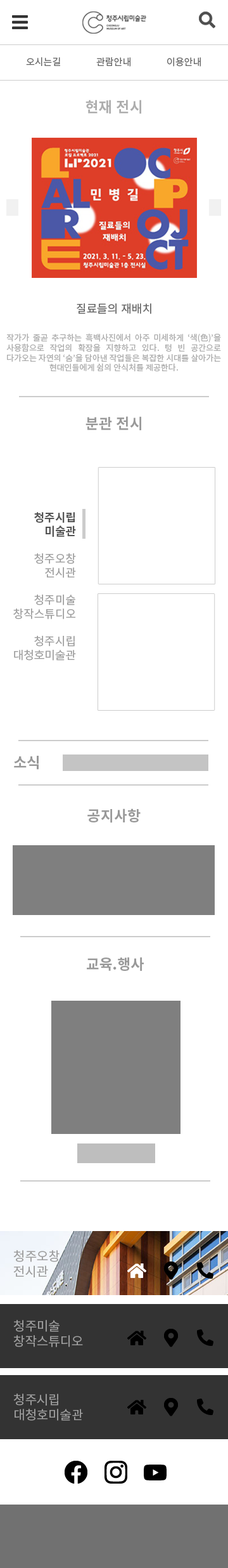
<style>
.page{position:relative;width:228px;height:1568px;background:#ffffff}
.page>*{position:absolute;margin:0}
.t1{font:9.5px "NotoSansCJKkr-Regular";color:#666666}
.t2{font:14.6px "NotoSansCJKkr-Bold";color:#adadad}
.t3{font:11.4px "NotoSansCJKkr-Regular";color:#666666}
.t4{font:8.2px "NotoSansCJKkr-Regular";color:#adadad}
.t5{font:14.6px "NotoSansCJKkr-Bold";color:#999999}
.t6{font:11.4px "NotoSansCJKkr-Bold";color:#555555}
.t7{font:11.4px "NotoSansCJKkr-Regular";color:#9e9e9e}
.t8{font:12.7px "NotoSansCJKkr-Regular";color:#9e9e9e}
</style>
<div class="page">
<p class="t1" style="left:26px;top:57px;width:34px;height:9px">오시는길</p>
<p class="t1" style="left:96px;top:57px;width:35px;height:10px">관람안내</p>
<p class="t1" style="left:168px;top:57px;width:33px;height:10px">이용안내</p>
<p class="t2" style="left:86px;top:100px;width:56px;height:14px">현재 전시</p>
<p class="t3" style="left:77px;top:303px;width:75px;height:11px">질료들의 재배치</p>
<p class="t4" style="left:6px;top:333px;width:215px;height:39px;text-align:justify">작가가 줄곧 추구하는 흑백사진에서 아주 미세하게 ‘색(色)’을 사용함으로 작업의 확장을 지향하고 있다. 텅 빈 공간으로 다가오는 자연의 ‘숨’을 담아낸 작업들은 복잡한 시대를 살아가는 현대인들에게 쉼의 안식처를 제공한다.</p>
<p class="t5" style="left:86px;top:416px;width:56px;height:14px">분관 전시</p>
<p class="t6" style="left:34px;top:512px;width:42px;height:25px;text-align:right">청주시립<br>미술관</p>
<p class="t7" style="left:34px;top:553px;width:42px;height:25px;text-align:right">청주오창<br>전시관</p>
<p class="t7" style="left:13px;top:595px;width:63px;height:24px;text-align:right">청주미술<br>창작스튜디오</p>
<p class="t7" style="left:14px;top:636px;width:62px;height:25px;text-align:right">청주시립<br>대청호미술관</p>
<p class="t5" style="left:14px;top:756px;width:25px;height:14px">소식</p>
<p class="t5" style="left:88px;top:808px;width:53px;height:15px">공지사항</p>
<p class="t5" style="left:87px;top:957px;width:57px;height:14px">교육.행사</p>
<p class="t8" style="left:13px;top:1250px;width:47px;height:27px">청주오창<br>전시관</p>
<p class="t8" style="left:13px;top:1320px;width:70px;height:27px">청주미술<br>창작스튜디오</p>
<p class="t8" style="left:13px;top:1393px;width:70px;height:28px">청주시립<br>대청호미술관</p>
</div>
